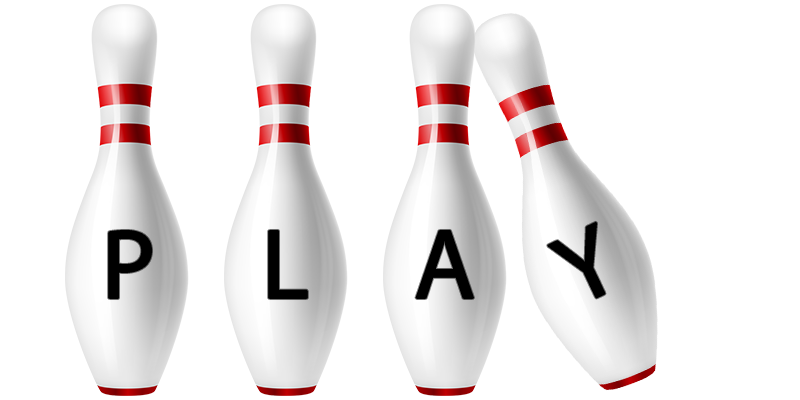
<style>
.page{position:relative;width:800px;height:400px;background:#ffffff}
.page>*{position:absolute;margin:0}
.t1{font:100px "MyriadPro-Regular";color:#000000}
</style>
<div class="page">
<p class="t1" style="left:548px;top:222px;width:57px;height:76px;rotate:-25deg">Y</p>
<p class="t1" style="left:109px;top:231px;width:42px;height:67px">P</p>
<p class="t1" style="left:269px;top:231px;width:38px;height:67px">L</p>
<p class="t1" style="left:416px;top:231px;width:57px;height:67px">A</p>
</div>
